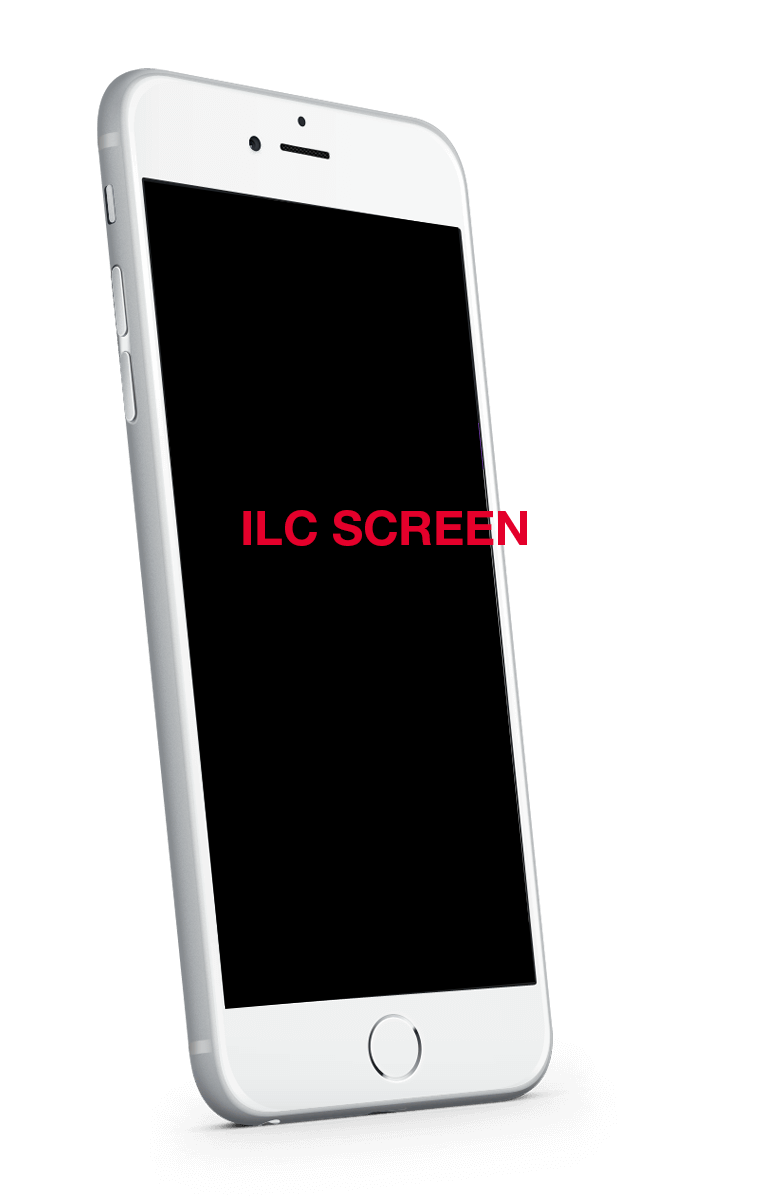
<style>
.page{position:relative;width:760px;height:1200px;background:#ffffff}
.page>*{position:absolute;margin:0}
.t1{font:48px "HelveticaNeueLTStd-Bd";color:#e4002b}
</style>
<div class="page">
<p class="t1" style="left:243px;top:510px;width:284px;height:36px">ILC SCREEN</p>
</div>
